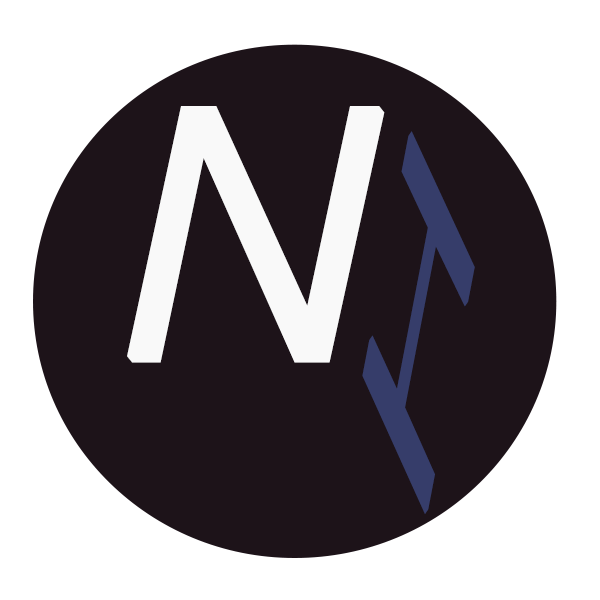
<style>
.page{position:relative;width:600px;height:600px;background:#1d1319}
.page>*{position:absolute;margin:0}
.t1{font:390.2px "Helvetica-Light-Light-Italic";color:#ffffff;text-transform:uppercase;font-weight:bold}
.t2{font:161.8px "Helvetica-Light-Light-Italic";color:#353b5e;text-transform:uppercase;font-weight:bold;scale:3.02 1}
</style>
<div class="page">
<p class="t1" style="left:127px;top:106px;width:258px;height:257px;opacity:0.96">N</p>
<p class="t2" style="left:362px;top:131px;width:113px;height:383px;rotate:-79deg">H</p>
</div>
